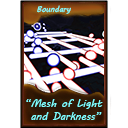
<style>
.page{position:relative;width:128px;height:128px;background:#ffffff}
.page>*{position:absolute;margin:0}
.t1{font:8px "MVBoli";color:#7fffff}
.t2{font:10.7px "MVBoli";color:#7fffff}
</style>
<div class="page">
<p class="t1" style="left:37px;top:5px;width:34px;height:9px">Boundary</p>
<p class="t2" style="left:26px;top:99px;width:77px;height:21px;text-align:center">“Mesh of Light <br>and Darkness”</p>
</div>
